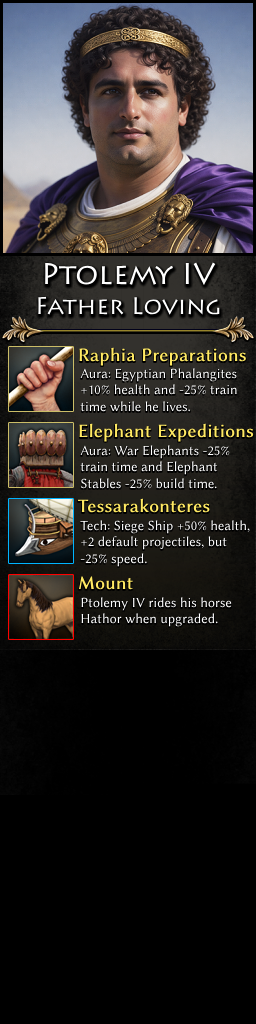
<style>
.page{position:relative;width:256px;height:1024px;background:#000000}
.page>*{position:absolute;margin:0}
.t1{font:24px/30px "Lithos";color:#ffffff}
.t2{font:30px/30px "Lithos";color:#ffffff}
.t3{font:19px "LinBiolinumO";color:#ffe963;font-weight:bold}
.t4{font:14px "LinBiolinumO";color:#ffffff}
</style>
<div class="page">
<p class="t1" style="left:38px;top:262px;width:182px;height:53px;text-align:center"><span class="t2">Ptolemy IV<br></span>Father Loving</p>
<p class="t3" style="left:79px;top:347px;width:167px;height:19px">Raphia Preparations</p>
<p class="t4" style="left:80px;top:368px;width:157px;height:44px">Aura: Egyptian Phalangites <br>+10% health and -25% train <br>time while he lives.</p>
<p class="t3" style="left:79px;top:423px;width:175px;height:19px">Elephant Expeditions</p>
<p class="t4" style="left:80px;top:445px;width:150px;height:44px">Aura: War Elephants -25% <br>train time and Elephant <br>Stables -25% build time.</p>
<p class="t3" style="left:78px;top:498px;width:132px;height:15px">Tessarakonteres</p>
<p class="t4" style="left:80px;top:520px;width:170px;height:47px">Tech: Siege Ship +50% health,<br>+2 default projectiles, but <br>-25% speed.</p>
<p class="t3" style="left:78px;top:576px;width:55px;height:14px">Mount</p>
<p class="t4" style="left:81px;top:597px;width:151px;height:30px">Ptolemy IV rides his horse <br>Hathor when upgraded.</p>
</div>
